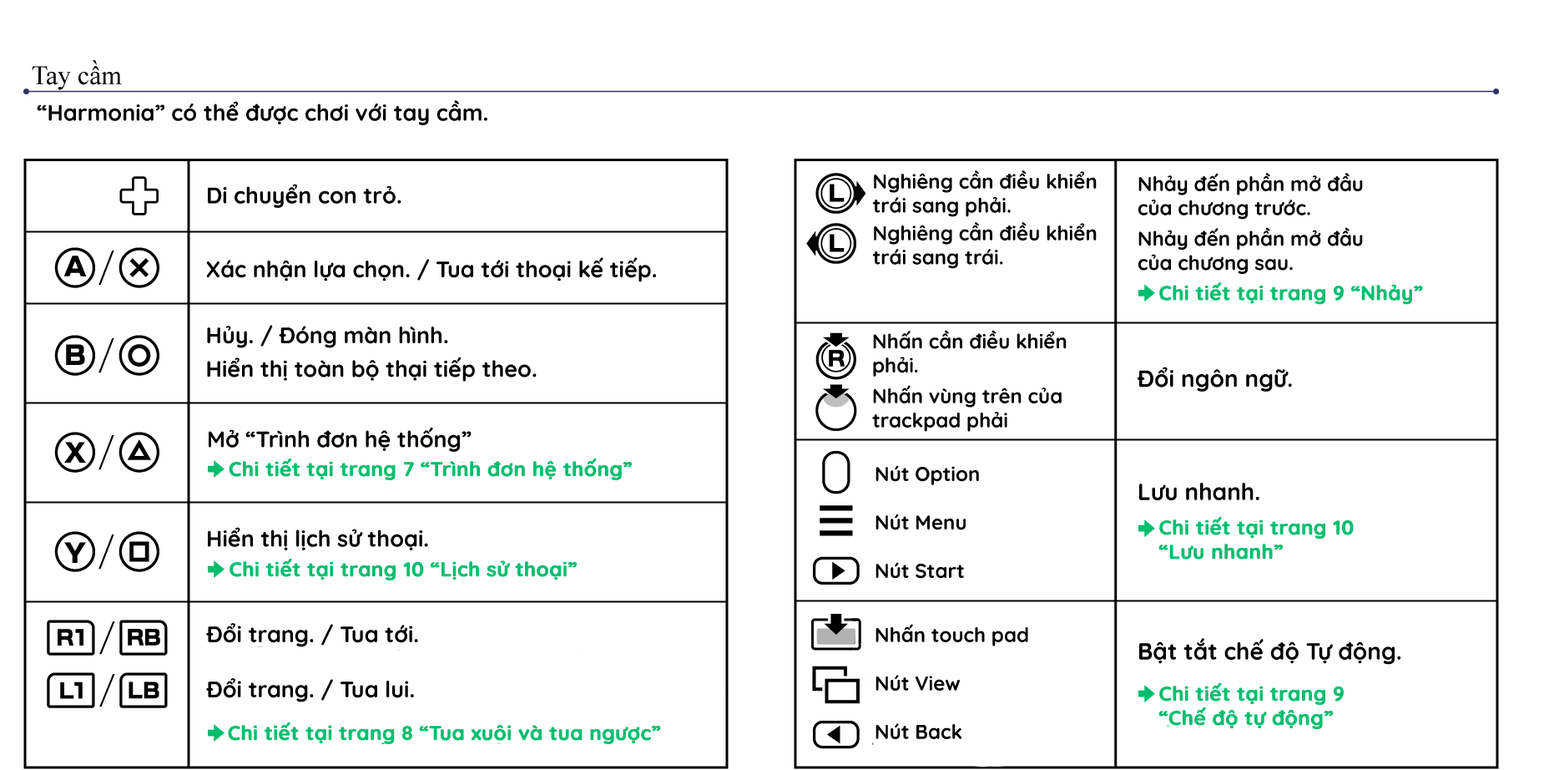
<style>
.page{position:relative;width:1549px;height:770px;background:#ffffff}
.page>*{position:absolute;margin:0}
.t1{font:26.7px "TimesNewRomanPSMT";color:#000000}
.t2{font:22.5px "Quicksand-Bold";color:#000000}
.t3{font:20px "Quicksand-Bold";color:#000000}
.t4{font:20px "Quicksand-Bold";color:#00be6e;font-weight:bold}
.t5{font:23.4px "Quicksand-Bold";color:#000000}
.t6{font:20px/41.7px "Quicksand-Bold";color:#000000}
.t7{font:22.5px/48.4px "Quicksand-Bold";color:#000000}
</style>
<div class="page">
<p class="t1" style="left:32px;top:60px;width:90px;height:30px">Tay cầm</p>
<p class="t2" style="left:37px;top:100px;width:451px;height:25px">“Harmonia” có thể được chơi với tay cầm.</p>
<p class="t3" style="left:872px;top:170px;width:225px;height:47px">Nghiêng cần điều khiển trái sang phải.</p>
<p class="t3" style="left:1139px;top:173px;width:224px;height:101px">Nhảy đến phần mở đầu của chương trước.<br>Nhảy đến phần mở đầu của chương sau.</p>
<p class="t2" style="left:208px;top:184px;width:194px;height:24px">Di chuyển con trỏ.</p>
<p class="t3" style="left:872px;top:222px;width:225px;height:47px">Nghiêng cần điều khiển trái sang trái.</p>
<p class="t2" style="left:206px;top:257px;width:450px;height:25px">Xác nhận lựa chọn. / Tua tới thoại kế tiếp.</p>
<p class="t4" style="left:1159px;top:282px;width:264px;height:23px">Chi tiết tại trang 9 “Nhảy”</p>
<p class="t2" style="left:207px;top:325px;width:330px;height:56px">Hủy. / Đóng màn hình.<br>Hiển thị toàn bộ thại tiếp theo.</p>
<p class="t3" style="left:872px;top:330px;width:195px;height:102px">Nhấn cần điều khiển phải.<br>Nhấn vùng trên của trackpad phải</p>
<p class="t5" style="left:1138px;top:366px;width:154px;height:26px">Đổi ngôn ngữ.</p>
<p class="t2" style="left:209px;top:427px;width:263px;height:25px">Mở “Trình đơn hệ thống”</p>
<p class="t4" style="left:229px;top:458px;width:403px;height:22px">Chi tiết tại trang 7 “Trình đơn hệ thống”</p>
<p class="t6" style="left:876px;top:465px;width:103px;height:113px">Nút Option<br>Nút Menu<br>Nút Start</p>
<p class="t5" style="left:1139px;top:482px;width:121px;height:18px">Lưu nhanh.</p>
<p class="t4" style="left:1159px;top:517px;width:195px;height:42px">Chi tiết tại trang 10 <br>“Lưu nhanh”</p>
<p class="t2" style="left:208px;top:527px;width:220px;height:23px">Hiển thị lịch sử thoại.</p>
<p class="t4" style="left:230px;top:558px;width:347px;height:22px">Chi tiết tại trang 10 “Lịch sử thoại”</p>
<p class="t7" style="left:206px;top:623px;width:212px;height:79px">Đổi trang. / Tua tới.<br>Đổi trang. / Tua lui.</p>
<p class="t6" style="left:876px;top:624px;width:152px;height:115px">Nhấn touch pad<br>Nút View<br>Nút Back</p>
<p class="t5" style="left:1139px;top:638px;width:262px;height:26px">Bật tắt chế độ Tự động.</p>
<p class="t4" style="left:1159px;top:683px;width:185px;height:46px">Chi tiết tại trang 9<br>“Chế độ tự động”</p>
<p class="t4" style="left:228px;top:722px;width:433px;height:22px">Chi tiết tại trang 8 “Tua xuôi và tua ngược”</p>
</div>
